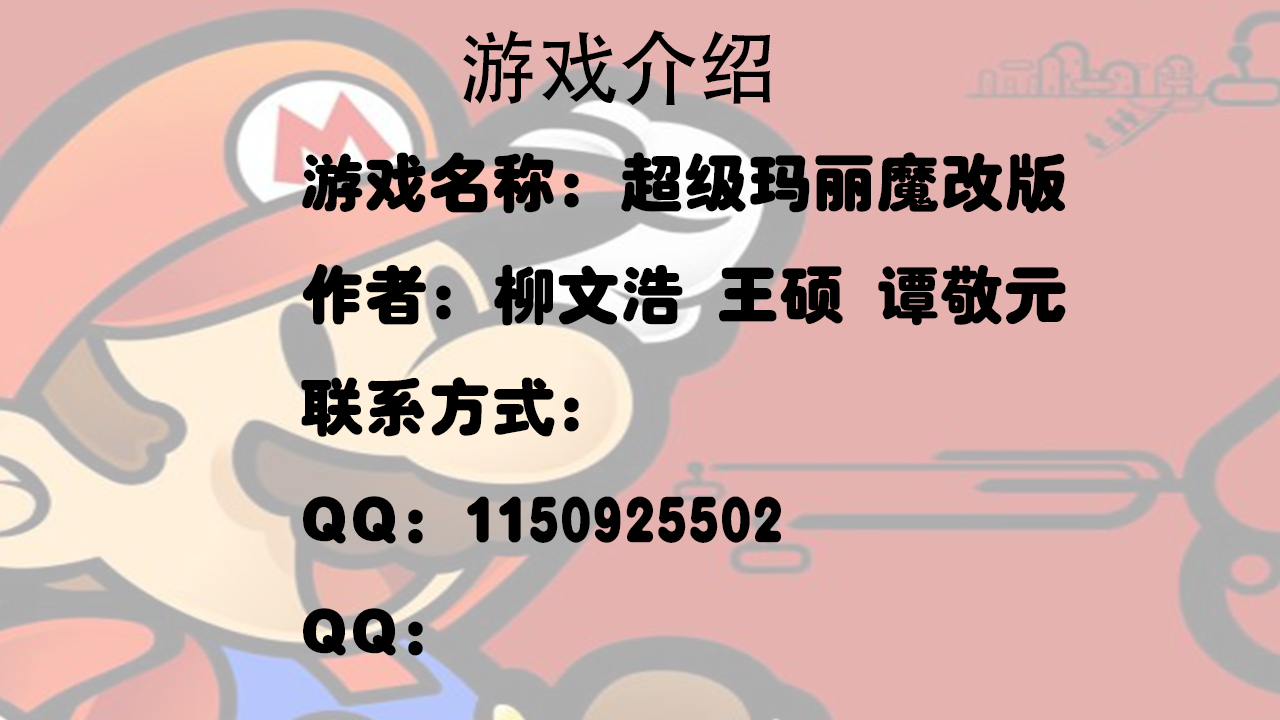
<style>
.page{position:relative;width:1280px;height:720px;background:#e5b2b0}
.page>*{position:absolute;margin:0}
.t1{font:80px "AdobeHeitiStd-Regular";color:#000000}
.t2{font:64px "HYe0gj";color:#000000}
</style>
<div class="page">
<p class="t1" style="left:463px;top:30px;width:308px;height:76px">游戏介绍</p>
<p class="t2" style="left:301px;top:152px;width:765px;height:504px">游戏名称：超级玛丽魔改版<br>作者：柳文浩 王硕 谭敬元<br>联系方式：<br>QQ：1150925502<br>QQ：</p>
</div>
